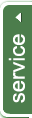
<style>
.page{position:relative;width:32px;height:118px;background:#4c7d4c}
.page>*{position:absolute;margin:0}
.t1{font:22px "ArialMT";color:#ffffff}
</style>
<div class="page">
<p class="t1" style="left:8px;top:34px;width:17px;height:69px;rotate:-90deg">service</p>
</div>
